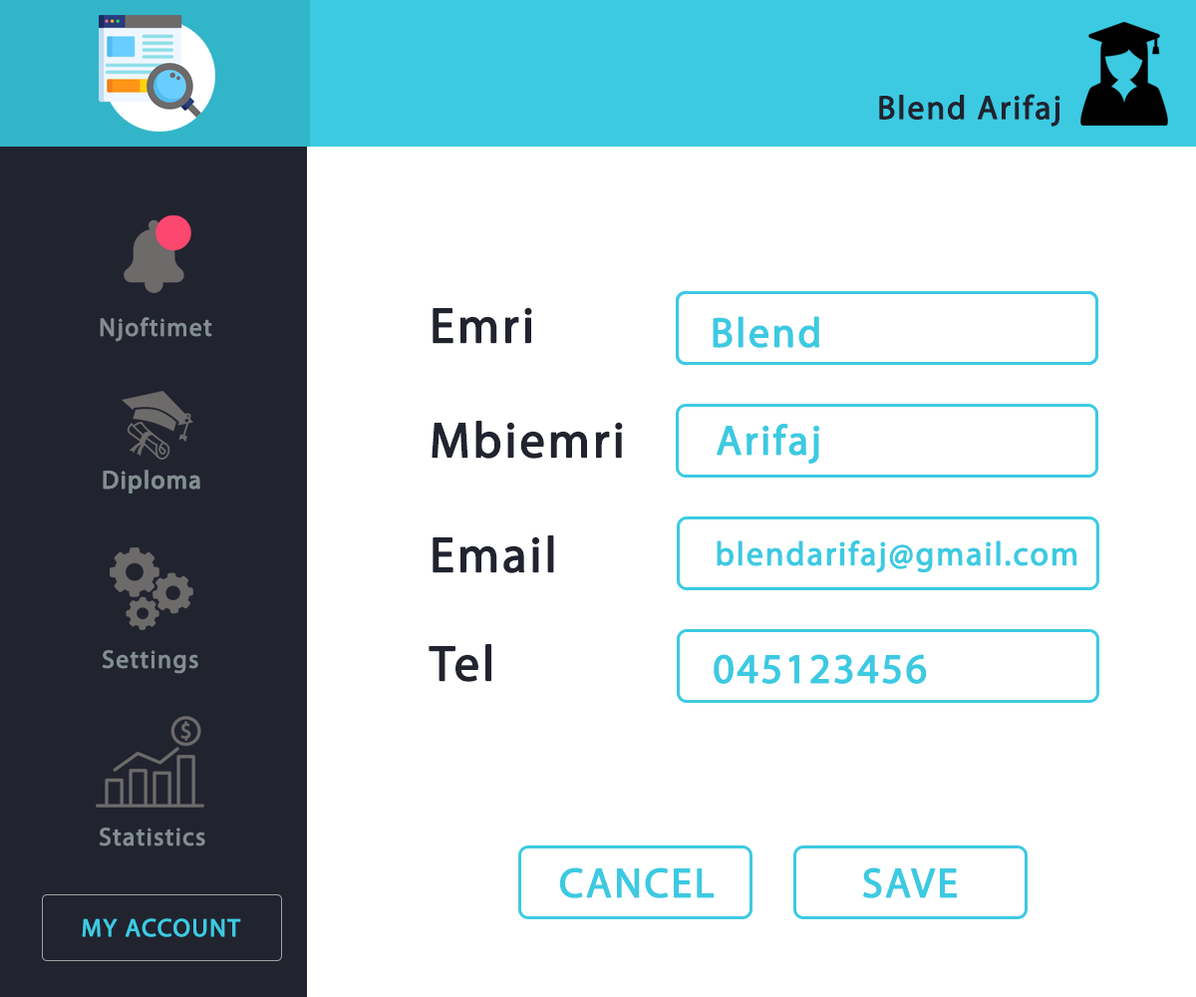
<style>
.page{position:relative;width:1196px;height:997px;background:#ffffff}
.page>*{position:absolute;margin:0}
.t1{font:33.2px "MyriadPro-Regular";letter-spacing:0.04em;color:#21232f;font-weight:bold}
.t2{font:24.9px "MyriadPro-Regular";letter-spacing:0.04em;color:#828e90;font-weight:bold}
.t3{font:49.8px "MyriadPro-Regular";letter-spacing:0.04em;color:#21232f;font-weight:bold}
.t4{font:41.5px "MyriadPro-Regular";letter-spacing:0.04em;color:#3ccae2;font-weight:bold}
.t5{font:33.2px "MyriadPro-Regular";letter-spacing:0.04em;color:#3ccae2;font-weight:bold}
.t6{font:24.9px "MyriadPro-Regular";letter-spacing:0.04em;color:#3ccae2;font-weight:bold}
</style>
<div class="page">
<p class="t1" style="left:879px;top:94px;width:182px;height:33px">Blend Arifaj</p>
<p class="t2" style="left:100px;top:317px;width:112px;height:25px">Njoftimet</p>
<p class="t3" style="left:433px;top:307px;width:99px;height:37px">Emri</p>
<p class="t4" style="left:713px;top:316px;width:106px;height:32px">Blend</p>
<p class="t3" style="left:432px;top:421px;width:191px;height:38px">Mbiemri</p>
<p class="t4" style="left:717px;top:424px;width:102px;height:40px">Arifaj</p>
<p class="t2" style="left:103px;top:470px;width:97px;height:23px">Diploma</p>
<p class="t2" style="left:103px;top:470px;width:97px;height:23px">Diploma</p>
<p class="t3" style="left:433px;top:535px;width:121px;height:38px">Email</p>
<p class="t5" style="left:717px;top:540px;width:361px;height:33px">blendarifaj@gmail.com</p>
<p class="t2" style="left:102px;top:650px;width:96px;height:24px">Settings</p>
<p class="t3" style="left:429px;top:644px;width:62px;height:38px">Tel</p>
<p class="t4" style="left:714px;top:654px;width:213px;height:30px">045123456</p>
<p class="t2" style="left:99px;top:827px;width:106px;height:19px">Statistics</p>
<p class="t4" style="left:559px;top:867px;width:156px;height:31px">CANCEL</p>
<p class="t4" style="left:863px;top:867px;width:94px;height:31px">SAVE</p>
<p class="t6" style="left:82px;top:918px;width:159px;height:19px">MY ACCOUNT</p>
</div>
